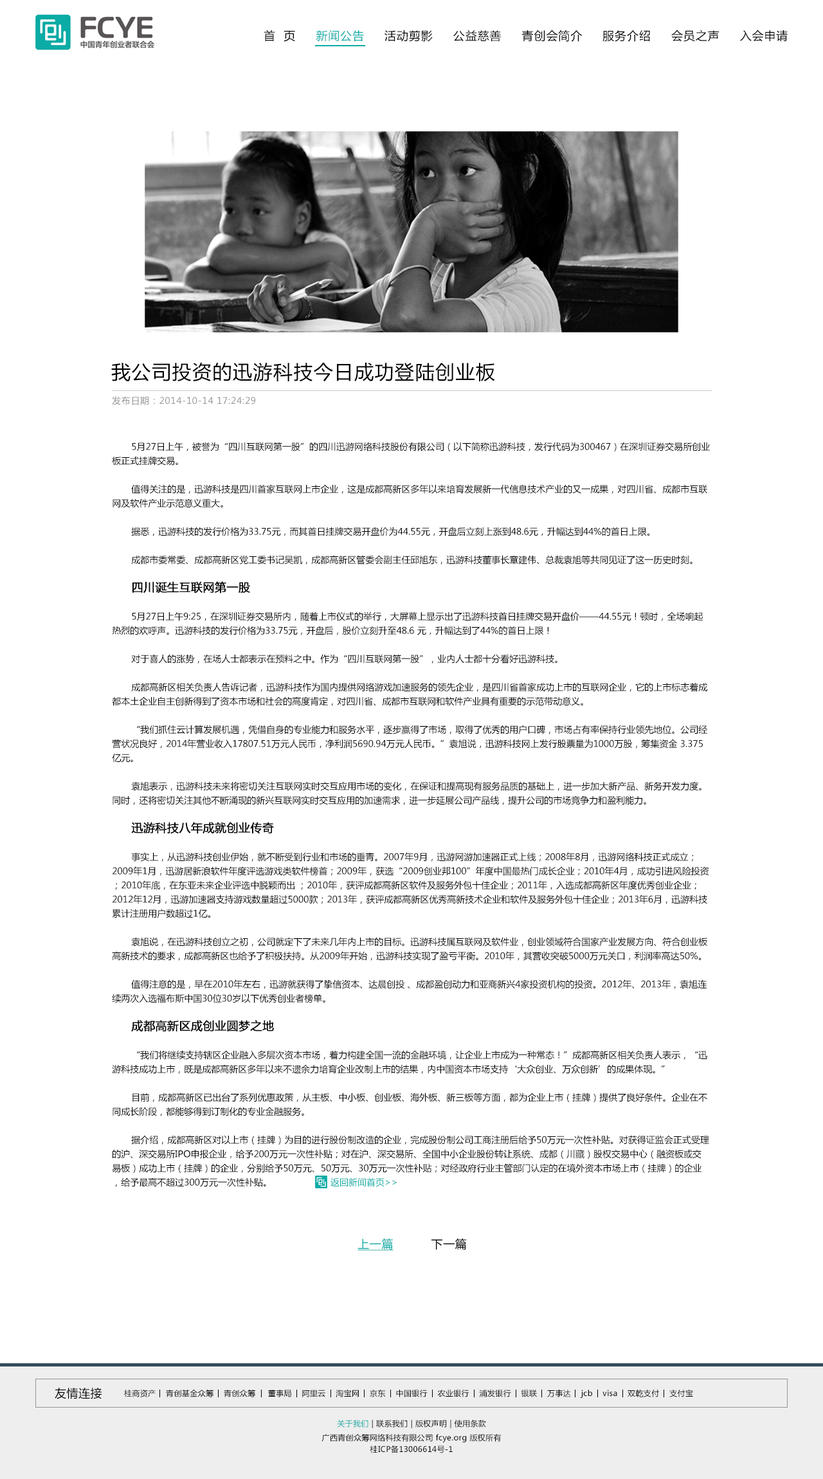
<style>
.page{position:relative;width:823px;height:1479px;background:#ffffff}
.page>*{position:absolute;margin:0}
.t1{font:11.6px "MicrosoftYaHei";letter-spacing:0.05em;color:#000000}
.t2{font:11.6px "MicrosoftYaHei";letter-spacing:0.05em;color:#0baca6}
.t3{font:19.3px "MicrosoftYaHei";letter-spacing:0.05em;color:#000000}
.t4{font:9px "MicrosoftYaHei";letter-spacing:0.05em;color:#969696}
.t5{font:9px/14.1px "MicrosoftYaHei";color:#000000}
.t6{font:11.6px/14.1px "MicrosoftYaHei";color:#000000;font-weight:bold}
.t7{font:9px/14.1px "MicrosoftYaHei";color:#0baca6}
.t8{font:11.6px "MicrosoftYaHei";letter-spacing:0.03em;color:#0caca6;text-decoration:underline}
.t9{font:11.6px "MicrosoftYaHei";letter-spacing:0.03em;color:#000000}
.t10{font:7.7px "MicrosoftYaHei";letter-spacing:0.03em;color:#000000}
.t11{font:7.7px "MicrosoftYaHei";letter-spacing:0.03em}
.t12{font:7.7px/11.6px "MicrosoftYaHei";letter-spacing:0.03em;color:#000000}
</style>
<div class="page">
<p class="t1" style="left:264px;top:30px;width:524px;height:12px">首  页     <span class="t2">新闻公告</span>     活动剪影     公益慈善     青创会简介     服务介绍     会员之声     入会申请</p>
<p class="t3" style="left:111px;top:362px;width:384px;height:20px">我公司投资的迅游科技今日成功登陆创业板</p>
<p class="t4" style="left:112px;top:396px;width:143px;height:9px">发布日期：2014-10-14 17:24:29</p>
<p class="t5" style="left:112px;top:442px;width:598px;height:745px">5月27日上午，被誉为“四川互联网第一股”的四川迅游网络科技股份有限公司（以下简称迅游科技，发行代码为300467）在深圳证券交易所创业板正式挂牌交易。<br><br>值得关注的是，迅游科技是四川首家互联网上市企业，这是成都高新区多年以来培育发展新一代信息技术产业的又一成果，对四川省、成都市互联网及软件产业示范意义重大。<br><br>据悉，迅游科技的发行价格为33.75元，而其首日挂牌交易开盘价为44.55元，开盘后立刻上涨到48.6元，升幅达到44%的首日上限｡<br><br>成都市委常委、成都高新区党工委书记吴凯，成都高新区管委会副主任邱旭东，迅游科技董事长章建伟、总裁袁旭等共同见证了这一历史时刻。<br><br><span class="t6">四川诞生互联网第一股<br></span><br>5月27日上午9:25，在深圳证券交易所内，随着上市仪式的举行，大屏幕上显示出了迅游科技首日挂牌交易开盘价——44.55元！顿时，全场响起热烈的欢呼声。迅游科技的发行价格为33.75元，开盘后，股价立刻升至48.6 元，升幅达到了44%的首日上限！<br><br>对于喜人的涨势，在场人士都表示在预料之中。作为“四川互联网第一股”，业内人士都十分看好迅游科技。<br><br>成都高新区相关负责人告诉记者，迅游科技作为国内提供网络游戏加速服务的领先企业，是四川省首家成功上市的互联网企业，它的上市标志着成都本土企业自主创新得到了资本市场和社会的高度肯定，对四川省、成都市互联网和软件产业具有重要的示范带动意义。<br><br>“我们抓住云计算发展机遇，凭借自身的专业能力和服务水平，逐步赢得了市场，取得了优秀的用户口碑，市场占有率保持行业领先地位。公司经营状况良好，2014年营业收入17807.51万元人民币，净利润5690.94万元人民币。”袁旭说，迅游科技网上发行股票量为1000万股，筹集资金 3.375亿元。<br><br>袁旭表示，迅游科技未来将密切关注互联网实时交互应用市场的变化，在保证和提高现有服务品质的基础上，进一步加大新产品、新务开发力度。同时，还将密切关注其他不断涌现的新兴互联网实时交互应用的加速需求，进一步延展公司产品线，提升公司的市场竞争力和盈利能力。<br><br><span class="t6">迅游科技八年成就创业传奇<br></span><br>事实上，从迅游科技创业伊始，就不断受到行业和市场的垂青。2007年9月，迅游网游加速器正式上线；2008年8月，迅游网络科技正式成立；2009年1月，迅游居新浪软件年度评选游戏类软件榜首；2009年，获选“2009创业邦100”年度中国最热门成长企业；2010年4月，成功引进风险投资；2010年底，在东亚未来企业评选中脱颖而出 ；2010年，获评成都高新区软件及服务外包十佳企业；2011年，入选成都高新区年度优秀创业企业；2012年12月，迅游加速器支持游戏数量超过5000款；2013年，获评成都高新区优秀高新技术企业和软件及服务外包十佳企业；2013年6月，迅游科技累计注册用户数超过1亿。<br><br>袁旭说，在迅游科技创立之初，公司就定下了未来几年内上市的目标。迅游科技属互联网及软件业，创业领域符合国家产业发展方向、符合创业板高新技术的要求，成都高新区也给予了积极扶持。从2009年开始，迅游科技实现了盈亏平衡。2010年，其营收突破5000万元关口，利润率高达50%。<br><br>值得注意的是，早在2010年左右，迅游就获得了挚信资本、达晨创投 、成都盈创动力和亚商新兴4家投资机构的投资。2012年、2013年，袁旭连续两次入选福布斯中国30位30岁以下优秀创业者榜单。<br><br><span class="t6">成都高新区成创业圆梦之地<br></span><br>“我们将继续支持辖区企业融入多层次资本市场，着力构建全国一流的金融环境，让企业上市成为一种常态！”成都高新区相关负责人表示，“迅游科技成功上市，既是成都高新区多年以来不遗余力培育企业改制上市的结果，内中国资本市场支持‘大众创业、万众创新’的成果体现。”<br><br>目前，成都高新区已出台了系列优惠政策，从主板、中小板、创业板、海外板、新三板等方面，都为企业上市（挂牌）提供了良好条件。企业在不同成长阶段，都能够得到订制化的专业金融服务。<br><br>据介绍，成都高新区对以上市（挂牌）为目的进行股份制改造的企业，完成股份制公司工商注册后给予50万元一次性补贴。对获得证监会正式受理的沪、深交易所IPO申报企业，给予200万元一次性补贴；对在沪、深交易所、全国中小企业股份转让系统、成都（川藏）股权交易中心（融资板或交易板）成功上市（挂牌）的企业，分别给予50万元、50万元、30万元一次性补贴；对经政府行业主管部门认定的在境外资本市场上市（挂牌）的企业，给予最高不超过300万元一次性补贴。                      <span class="t7">返回新闻首页&gt;&gt;</span></p>
<p class="t8" style="left:357px;top:1238px;width:110px;height:12px">上一篇<span class="t9">          下一篇</span></p>
<p class="t9" style="left:55px;top:1387px;width:47px;height:12px">友情连接</p>
<p class="t10" style="left:124px;top:1389px;width:569px;height:9px">桂商资产    青创基金众筹    青创众筹     董事局    阿里云    淘宝网    京东    中国银行    农业银行    浦发银行    银联    万事达    jcb    visa    双乾支付    支付宝</p>
<p class="t11" style="left:337px;top:1419px;width:149px;height:9px">关于我们 | 联系我们 | 版权声明 | 使用条款</p>
<p class="t12" style="left:321px;top:1434px;width:180px;height:19px;text-align:center">广西青创众筹网络科技有限公司 fcye.org 版权所有<br>桂ICP备13006614号-1</p>
</div>
